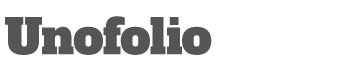
<style>
.page{position:relative;width:358px;height:74px;background:#ffffff}
.page>*{position:absolute;margin:0}
.t1{font:48px "AlfaSlabOne-Regular";color:#555555}
</style>
<div class="page">
<p class="t1" style="left:5px;top:16px;width:207px;height:39px">Unofolio</p>
</div>
